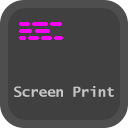
<style>
.page{position:relative;width:128px;height:128px;background:#404040}
.page>*{position:absolute;margin:0}
.t1{font:14px "LucidaSans-TypewriterBold";color:#c6c6c6}
</style>
<div class="page">
<p class="t1" style="left:14px;top:86px;width:100px;height:11px">Screen Print</p>
</div>
